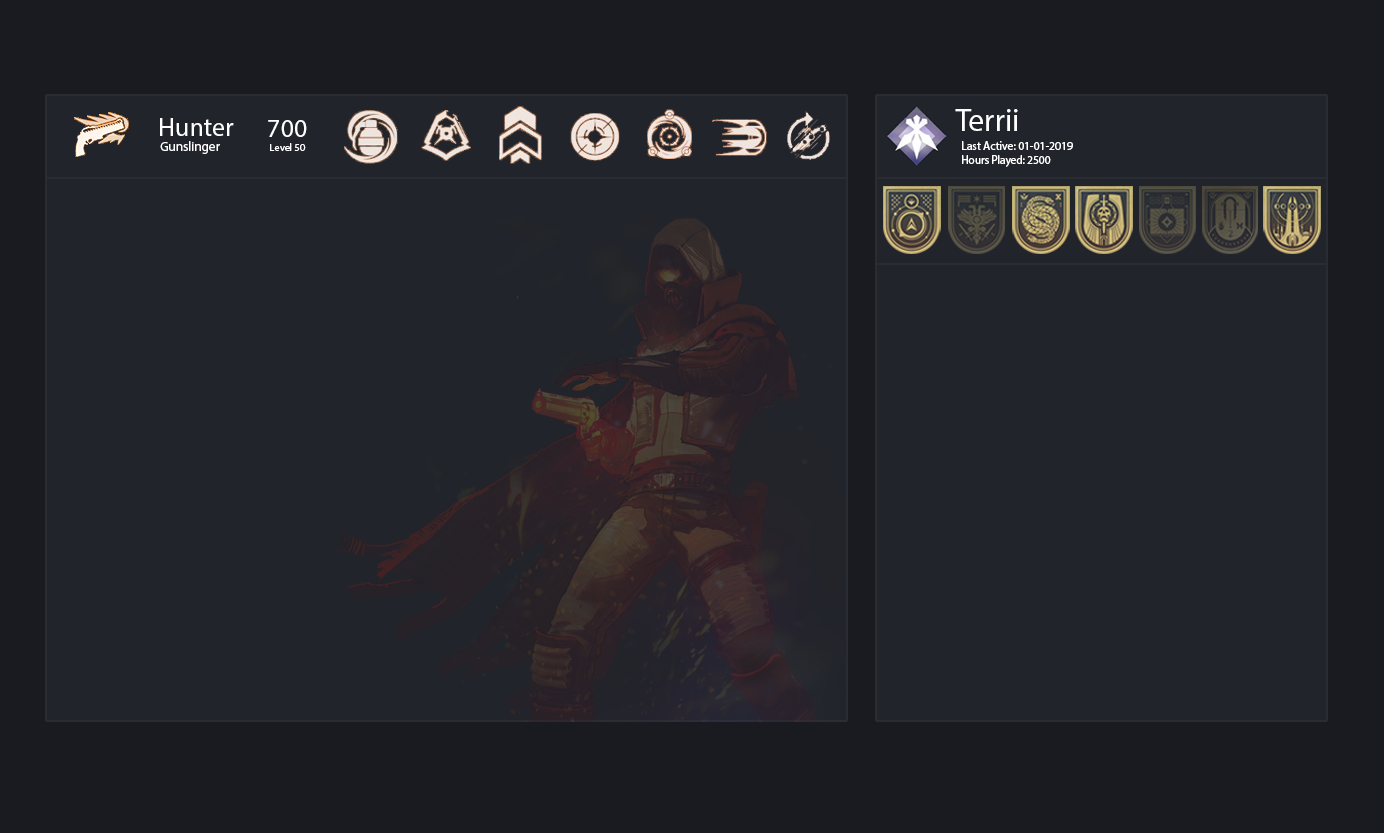
<style>
.page{position:relative;width:1384px;height:833px;background:#21242a}
.page>*{position:absolute;margin:0}
.t1{font:31.5px "MyriadPro-Regular";color:#ffffff}
.t2{font:25.7px "MyriadPro-Regular";color:#ffffff}
.t3{font:25.6px "MyriadPro-Regular";color:#ffffff}
.t4{font:13.1px "MyriadPro-Regular";color:#ffffff}
.t5{font:10.2px "MyriadPro-Regular";color:#ffffff}
.t6{font:12.1px "MyriadPro-Regular";color:#ffffff;scale:0.96 1}
.t7{font:12.1px "MyriadPro-Regular";color:#ffffff;scale:0.93 1}
</style>
<div class="page">
<p class="t1" style="left:955px;top:109px;width:63px;height:22px">Terrii</p>
<p class="t2" style="left:160px;top:118px;width:74px;height:18px">Hunter</p>
<p class="t3" style="left:268px;top:120px;width:39px;height:17px">700</p>
<p class="t4" style="left:160px;top:141px;width:60px;height:13px">Gunslinger</p>
<p class="t5" style="left:270px;top:143px;width:36px;height:8px">Level 50</p>
<p class="t6" style="left:962px;top:141px;width:111px;height:9px">Last Active: 01-01-2019</p>
<p class="t7" style="left:962px;top:155px;width:89px;height:12px">Hours Played: 2500</p>
</div>
